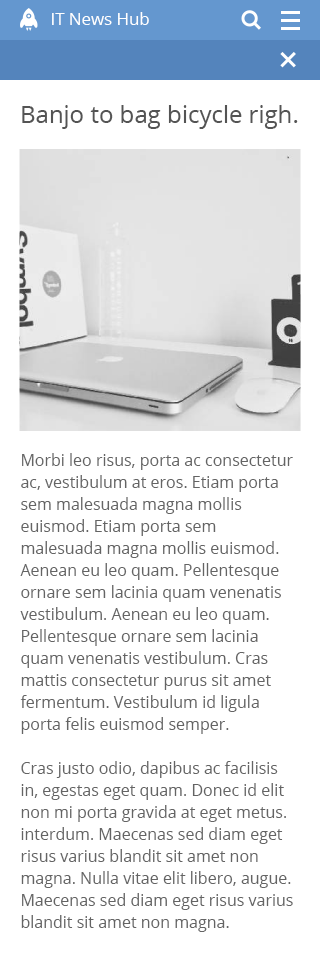
<style>
.page{position:relative;width:320px;height:955px;background:#ffffff}
.page>*{position:absolute;margin:0}
.t1{font:16.8px "OpenSans";color:#ffffff}
.t2{font:24px "OpenSans";color:#545454}
.t3{font:16px/22px "OpenSans";color:#646464}
</style>
<div class="page">
<p class="t1" style="left:52px;top:12px;width:97px;height:13px">IT News Hub</p>
<p class="t2" style="left:22px;top:105px;width:276px;height:24px">Banjo to bag bicycle righ.</p>
<p class="t3" style="left:20px;top:453px;width:273px;height:479px">Morbi leo risus, porta ac consectetur ac, vestibulum at eros. Etiam porta sem malesuada magna mollis euismod. Etiam porta sem malesuada magna mollis euismod. Aenean eu leo quam. Pellentesque ornare sem lacinia quam venenatis vestibulum. Aenean eu leo quam. Pellentesque ornare sem lacinia quam venenatis vestibulum. Cras mattis consectetur purus sit amet fermentum. Vestibulum id ligula porta felis euismod semper.<br><br>Cras justo odio, dapibus ac facilisis in, egestas eget quam. Donec id elit non mi porta gravida at eget metus.  interdum. Maecenas sed diam eget risus varius blandit sit amet non magna. Nulla vitae elit libero, augue. Maecenas sed diam eget risus varius blandit sit amet non magna.</p>
</div>
